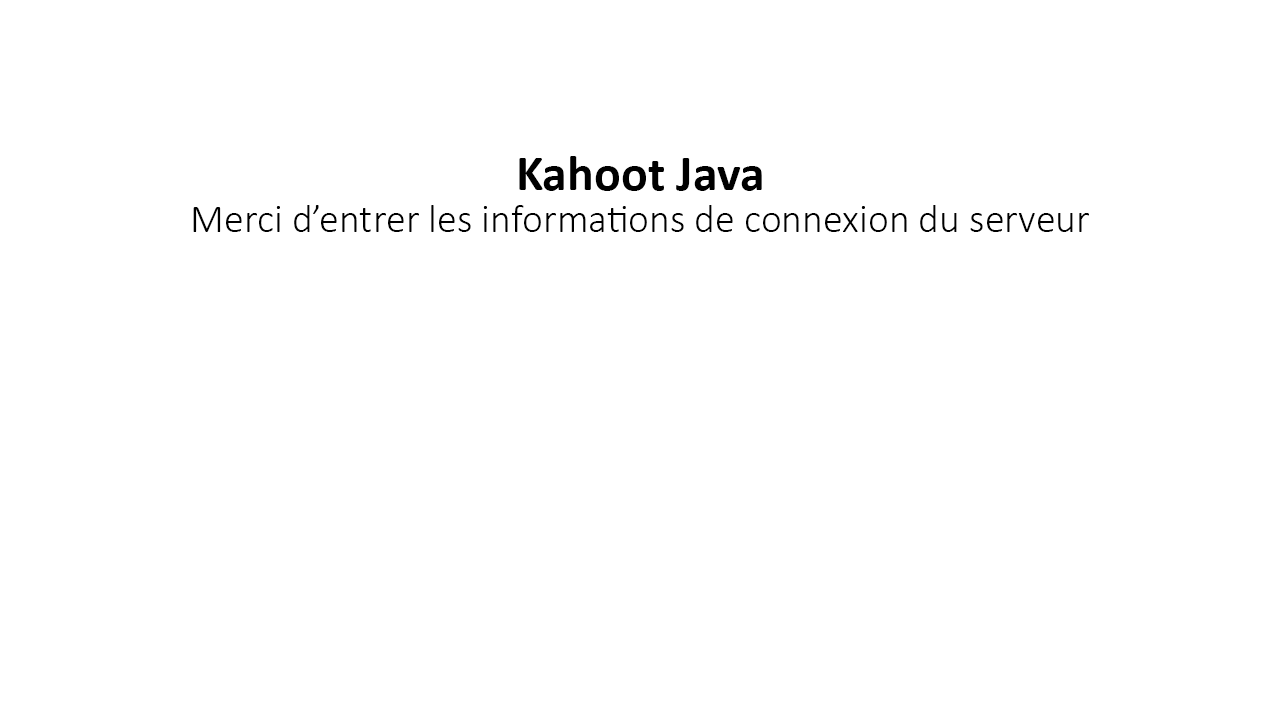
<style>
.page{position:relative;width:1280px;height:720px;background:#ffffff}
.page>*{position:absolute;margin:0}
.t1{font:50px "Calibri-Bold";color:#000000}
.t2{font:40px "Calibri-Light";color:#000000}
</style>
<div class="page">
<p class="t1" style="left:519px;top:156px;width:243px;height:35px">Kahoot Java</p>
<p class="t2" style="left:193px;top:205px;width:896px;height:27px">Merci d’entrer les informations de connexion du serveur</p>
</div>
